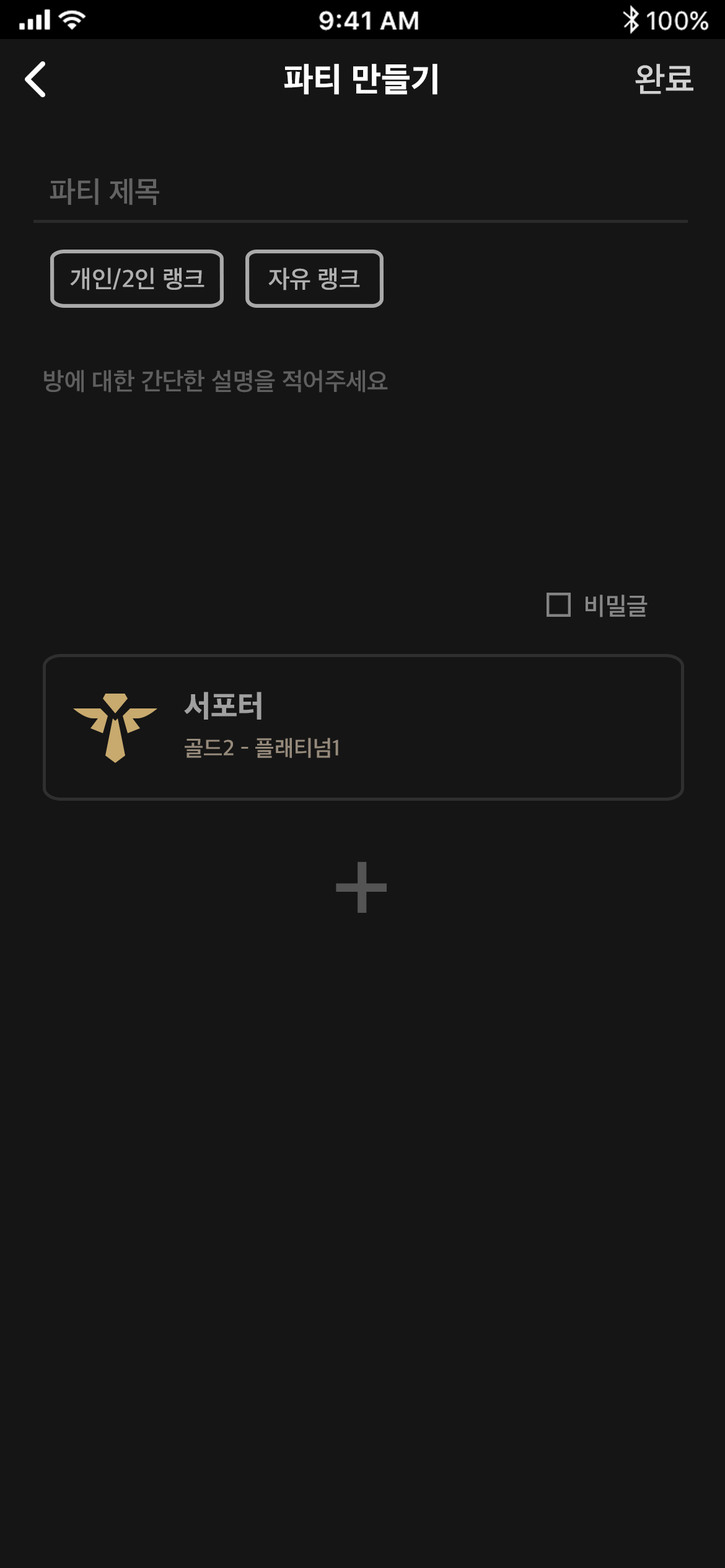
<style>
.page{position:relative;width:725px;height:1568px;background:#151515}
.page>*{position:absolute;margin:0}
.t1{font:34.1px "AppleSDGothicNeoEB00";color:#ffffff}
.t2{font:34.1px "AppleSDGothicNeoSB00";color:#d1d1d1}
.t3{font:29.7px "AppleSDGothicNeoSB00";color:#636363}
.t4{font:24.8px "AppleSDGothicNeoSB00";color:#afafaf}
.t5{font:24.8px "AppleSDGothicNeoSB00";color:#5f5f5f}
.t6{font:24.8px "AppleSDGothicNeoSB00";color:#878787}
.t7{font:31px "AppleSDGothicNeoEB00";color:#a0a0a0}
.t8{font:22.3px "AppleSDGothicNeoSB00";color:#968a7b}
.t9{font:111.4px "AppleSDGothicNeoM00";color:#686868}
</style>
<div class="page">
<p class="t1" style="left:284px;top:64px;width:153px;height:31px">파티 만들기</p>
<p class="t2" style="left:635px;top:64px;width:58px;height:30px">완료</p>
<p class="t3" style="left:50px;top:178px;width:109px;height:27px">파티 제목</p>
<p class="t4" style="left:70px;top:268px;width:134px;height:22px">개인/2인 랭크</p>
<p class="t4" style="left:268px;top:268px;width:92px;height:22px">자유 랭크</p>
<p class="t5" style="left:44px;top:370px;width:344px;height:23px">방에 대한 간단한 설명을 적어주세요</p>
<p class="t6" style="left:585px;top:595px;width:62px;height:22px">비밀글</p>
<p class="t7" style="left:184px;top:692px;width:77px;height:28px">서포터</p>
<p class="t8" style="left:185px;top:738px;width:153px;height:20px">골드2 - 플래티넘1</p>
<p class="t9" style="left:336px;top:861px;width:50px;height:52px;opacity:0.69">+</p>
</div>
